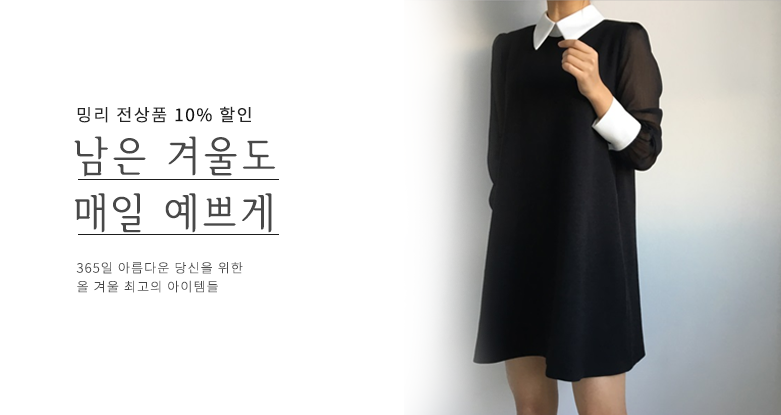
<style>
.page{position:relative;width:781px;height:415px;background:#ffffff}
.page>*{position:absolute;margin:0}
.t1{font:17px "NotoSansCJKkr-DemiLight";letter-spacing:0.085em;color:#242424}
.t2{font:17px "NotoSansCJKkr-Regular";letter-spacing:0.085em;color:#131313}
.t3{font:17px "NotoSansCJKkr-Regular";letter-spacing:0.085em;color:#242424}
.t4{font:42.2px/56.8px "SeH-CL";letter-spacing:0.085em;color:#484848}
.t5{font:12.8px/18.8px "NotoSansCJKkr-Light";letter-spacing:0.085em;color:#484848}
</style>
<div class="page">
<p class="t1" style="left:77px;top:106px;width:174px;height:17px">밍리 전상품 <span class="t2">10%</span><span class="t3"> 할인</span></p>
<p class="t4" style="left:74px;top:136px;width:202px;height:97px">남은 겨울도<br>매일 예쁘게</p>
<p class="t5" style="left:76px;top:262px;width:167px;height:31px">365일 아름다운 당신을 위한<br>올 겨울 최고의 아이템들</p>
</div>
